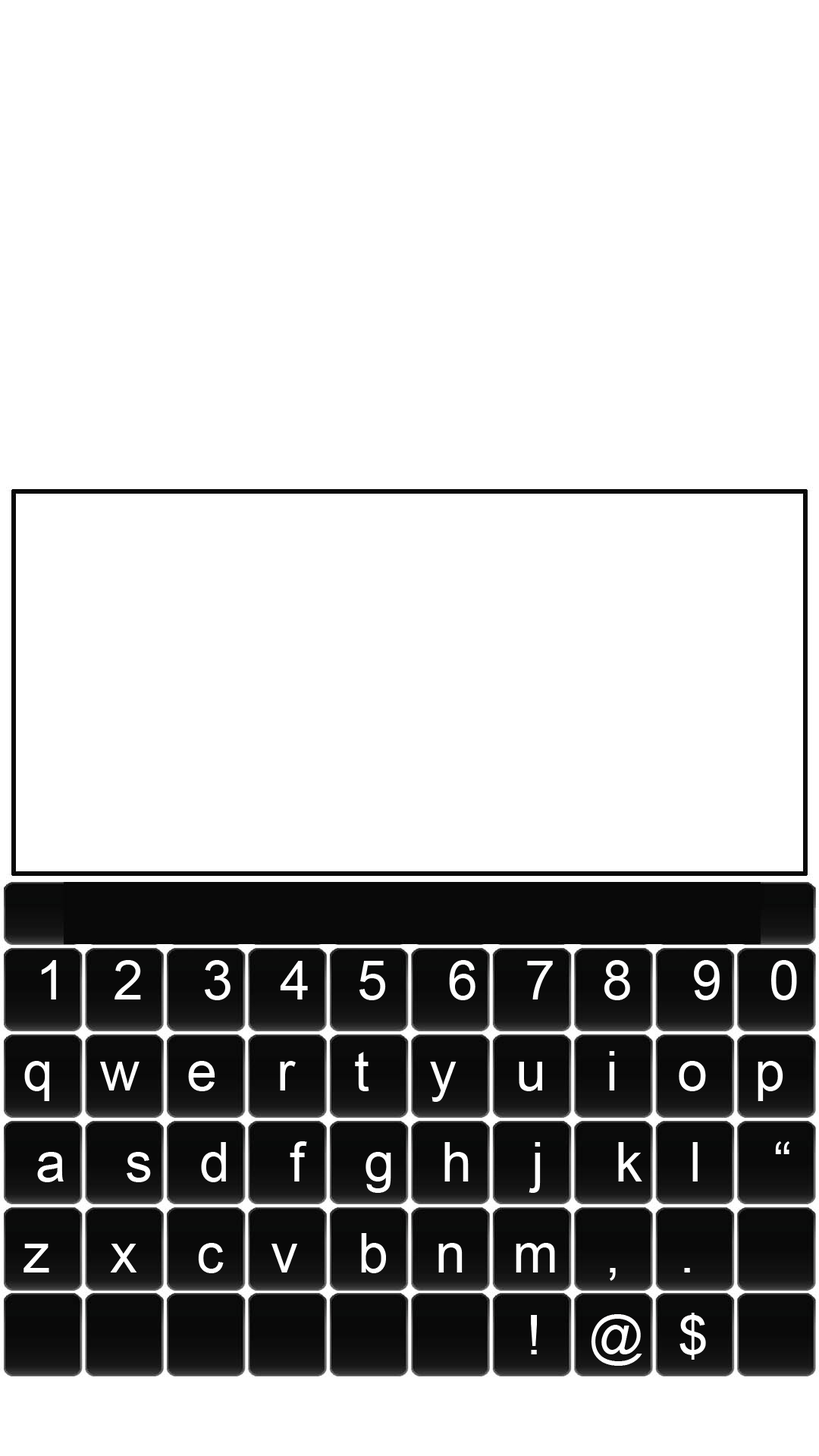
<style>
.page{position:relative;width:819px;height:1456px;background:#ffffff}
.page>*{position:absolute;margin:0}
.t1{font:54.6px/45.5px "ArialMT";letter-spacing:-0.05em;color:#ffffff}
.t2{font:54.6px/27.3px "ArialMT";letter-spacing:-0.05em;color:#ffffff}
.t3{font:54.6px "ArialMT";letter-spacing:-0.05em;color:#ffffff}
</style>
<div class="page">
<p class="t1" style="left:24px;top:960px;width:773px;height:321px"><span class="t2">1    2     3    4    5     6    7    8     9    0<br></span> <br>q    w    e     r     t     y     u     i     o    p <br><br> a     s    d     f     g    h     j      k    l      “<br><br>z     x     c    v     b    n    m    ,     .</p>
<p class="t3" style="left:531px;top:1313px;width:175px;height:53px">!    @   $</p>
</div>
